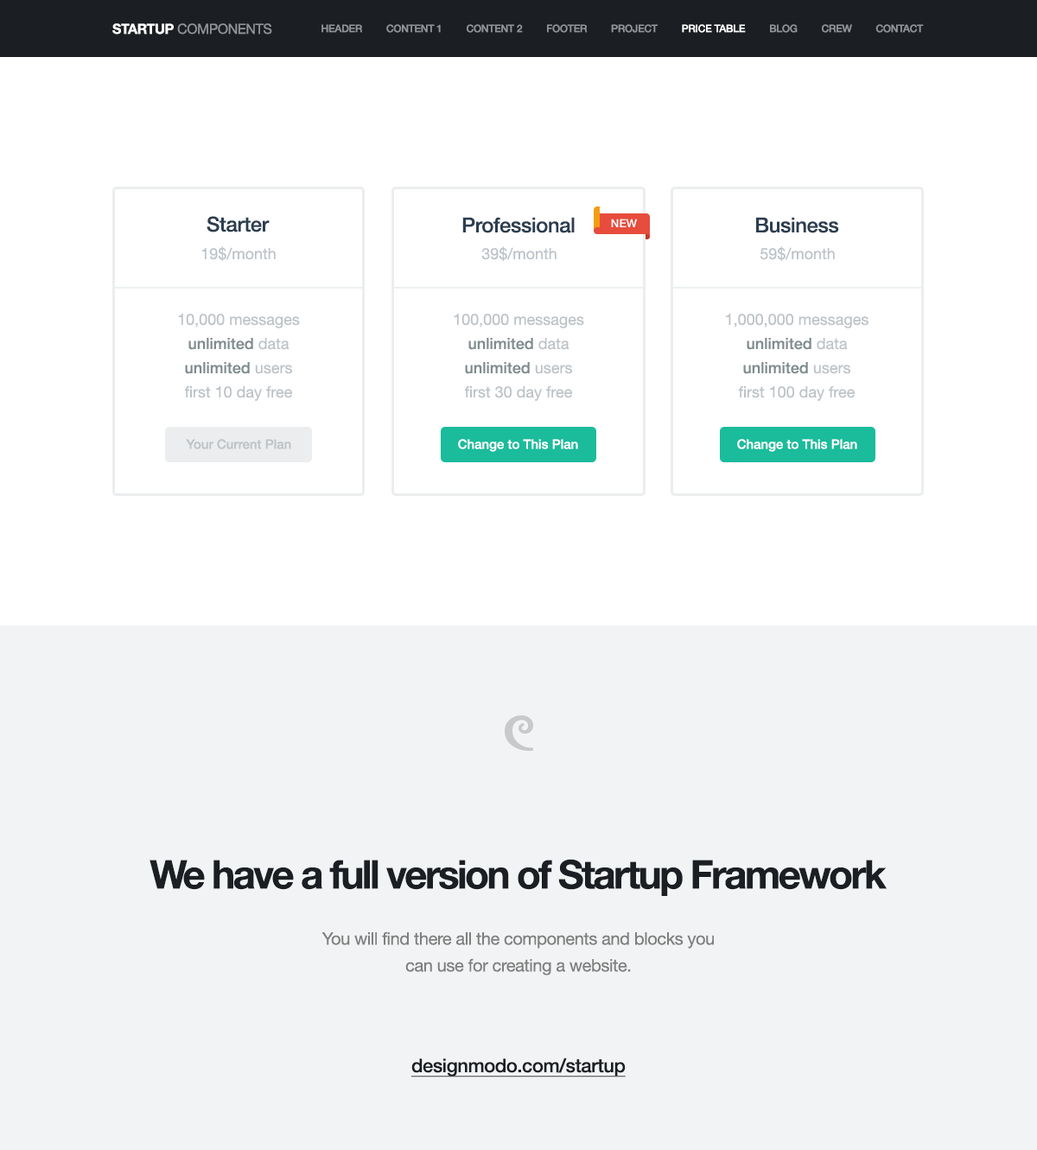
<style>
.page{position:relative;width:1037px;height:1150px;background:#ffffff}
.page>*{position:absolute;margin:0}
.t1{font:13.8px "HelveticaNeue";letter-spacing:-0.02em;color:#919497;text-transform:uppercase}
.t2{font:13.8px "HelveticaNeue-Bold";letter-spacing:-0.02em;color:#ffffff;text-transform:uppercase}
.t3{font:10.4px "HelveticaNeue-Medium";letter-spacing:-0.02em;color:#919497;text-transform:uppercase}
.t4{font:10.4px "HelveticaNeue-Medium";letter-spacing:-0.02em;color:#ffffff;text-transform:uppercase}
.t5{font:20.7px "HelveticaNeue-Medium";letter-spacing:-0.02em;color:#2c3e50}
.t6{font:11.2px "HelveticaNeue-Medium";color:#ffffff;text-transform:uppercase}
.t7{font:15.6px "HelveticaNeue";color:#bdc3c9}
.t8{font:15.6px/24.2px "HelveticaNeue";color:#bdc3c7}
.t9{font:15.6px/24.2px "HelveticaNeue-Medium";color:#7f8c8d}
.t10{font:13px "HelveticaNeue-Medium";color:#bdc3c7}
.t11{font:13px "HelveticaNeue-Medium";color:#ffffff}
.t12{font:39.7px "HelveticaNeue-Bold";letter-spacing:-0.06em;color:#1b1f23}
.t13{font:17.3px/26.8px "HelveticaNeue";letter-spacing:-0.02em;color:#7e7e7e}
.t14{font:19px "HelveticaNeue-Medium";letter-spacing:-0.02em;color:#1b1f23;text-decoration:underline}
</style>
<div class="page">
<p class="t1" style="left:112px;top:23px;width:160px;height:12px"><span class="t2">Startup </span>components</p>
<p class="t3" style="left:321px;top:24px;width:603px;height:9px">header         content 1         content 2         footer         project         <span class="t4">price table         </span>blog         crew         contact</p>
<p class="t5" style="left:207px;top:216px;width:63px;height:16px">Starter</p>
<p class="t5" style="left:462px;top:217px;width:113px;height:16px">Professional</p>
<p class="t6" style="left:611px;top:219px;width:26px;height:8px">NEW</p>
<p class="t5" style="left:756px;top:217px;width:83px;height:16px">Business</p>
<p class="t7" style="left:201px;top:246px;width:75px;height:15px">19$/month</p>
<p class="t7" style="left:481px;top:246px;width:75px;height:15px">39$/month</p>
<p class="t7" style="left:759px;top:246px;width:76px;height:15px">59$/month</p>
<p class="t8" style="left:178px;top:314px;width:122px;height:87px;text-align:center">10,000 messages<br><span class="t9">unlimited </span>data<br><span class="t9">unlimited </span>users<br>first 10 day free</p>
<p class="t8" style="left:454px;top:314px;width:130px;height:87px;text-align:center">100,000 messages<br><span class="t9">unlimited </span>data<br><span class="t9">unlimited </span>users<br>first 30 day free</p>
<p class="t8" style="left:726px;top:314px;width:142px;height:87px;text-align:center">1,000,000 messages<br><span class="t9">unlimited </span>data<br><span class="t9">unlimited </span>users<br>first 100 day free</p>
<p class="t10" style="left:186px;top:439px;width:105px;height:10px">Your Current Plan</p>
<p class="t11" style="left:458px;top:439px;width:120px;height:13px">Change to This Plan</p>
<p class="t11" style="left:737px;top:439px;width:120px;height:13px">Change to This Plan</p>
<p class="t12" style="left:149px;top:859px;width:738px;height:37px">We have a full version of Startup Framework</p>
<p class="t13" style="left:321px;top:931px;width:393px;height:45px;text-align:center">You will find there all the components and blocks you can use for creating a website.</p>
<p class="t14" style="left:411px;top:1058px;width:215px;height:19px">designmodo.com/startup</p>
</div>
